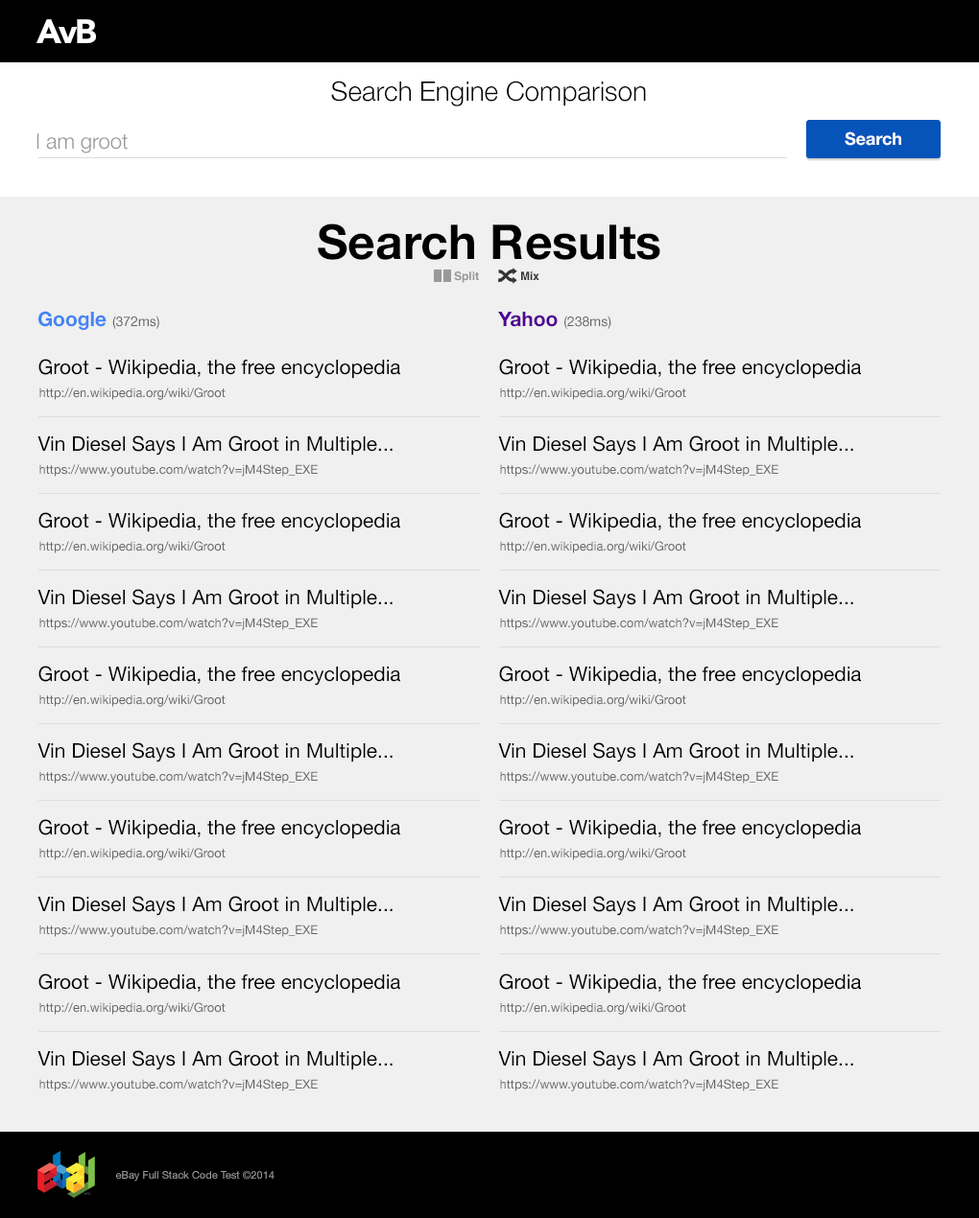
<style>
.page{position:relative;width:979px;height:1218px;background:#f0f0f0}
.page>*{position:absolute;margin:0}
.t1{font:33.6px "AvenirLTStd-Black";letter-spacing:-0.05em;color:#ffffff}
.t2{font:26.9px "HelveticaNeue-Light";color:#000000}
.t3{font:21.1px "HelveticaNeue-Light";color:#999999}
.t4{font:17.3px "HelveticaNeue-Bold";color:#ffffff}
.t5{font:48px "HelveticaNeue-Bold";color:#000000}
.t6{font:11.5px "Helvetica-Bold";color:#999999}
.t7{font:11.5px "Helvetica-Bold";color:#333333}
.t8{font:13.4px "HelveticaNeue";color:#666666}
.t9{font:20.1px "HelveticaNeue-Bold";color:#4285f4}
.t10{font:20.1px "HelveticaNeue-Bold";color:#500095}
.t11{font:20.1px "HelveticaNeue";color:#000000}
.t12{font:12.5px "HelveticaNeue";color:#666666}
.t13{font:10.6px "HelveticaNeue";color:#999999}
</style>
<div class="page">
<p class="t1" style="left:36px;top:19px;width:60px;height:24px">AvB</p>
<p class="t2" style="left:331px;top:81px;width:315px;height:25px">Search Engine Comparison</p>
<p class="t3" style="left:36px;top:133px;width:92px;height:21px">I am groot</p>
<p class="t4" style="left:844px;top:131px;width:57px;height:15px">Search</p>
<p class="t5" style="left:318px;top:224px;width:342px;height:36px">Search Results</p>
<p class="t6" style="left:454px;top:272px;width:25px;height:11px">Split</p>
<p class="t7" style="left:521px;top:272px;width:18px;height:8px">Mix</p>
<p class="t8" style="left:38px;top:311px;width:121px;height:19px"><span class="t9">Google </span>(372ms)</p>
<p class="t8" style="left:498px;top:312px;width:113px;height:17px"><span class="t10">Yahoo </span>(238ms)</p>
<p class="t11" style="left:38px;top:359px;width:362px;height:20px">Groot - Wikipedia, the free encyclopedia</p>
<p class="t11" style="left:499px;top:359px;width:362px;height:20px">Groot - Wikipedia, the free encyclopedia</p>
<p class="t12" style="left:39px;top:388px;width:186px;height:12px">http://en.wikipedia.org/wiki/Groot</p>
<p class="t12" style="left:500px;top:388px;width:186px;height:12px">http://en.wikipedia.org/wiki/Groot</p>
<p class="t11" style="left:37px;top:436px;width:355px;height:20px">Vin Diesel Says I Am Groot in Multiple...</p>
<p class="t11" style="left:498px;top:436px;width:355px;height:20px">Vin Diesel Says I Am Groot in Multiple...</p>
<p class="t12" style="left:39px;top:464px;width:279px;height:13px">https://www.youtube.com/watch?v=jM4Step_EXE</p>
<p class="t12" style="left:500px;top:464px;width:278px;height:13px">https://www.youtube.com/watch?v=jM4Step_EXE</p>
<p class="t11" style="left:38px;top:512px;width:362px;height:20px">Groot - Wikipedia, the free encyclopedia</p>
<p class="t11" style="left:499px;top:512px;width:362px;height:20px">Groot - Wikipedia, the free encyclopedia</p>
<p class="t12" style="left:39px;top:541px;width:186px;height:13px">http://en.wikipedia.org/wiki/Groot</p>
<p class="t12" style="left:500px;top:541px;width:186px;height:13px">http://en.wikipedia.org/wiki/Groot</p>
<p class="t11" style="left:37px;top:589px;width:355px;height:20px">Vin Diesel Says I Am Groot in Multiple...</p>
<p class="t11" style="left:498px;top:589px;width:355px;height:20px">Vin Diesel Says I Am Groot in Multiple...</p>
<p class="t12" style="left:39px;top:618px;width:279px;height:12px">https://www.youtube.com/watch?v=jM4Step_EXE</p>
<p class="t12" style="left:500px;top:618px;width:278px;height:12px">https://www.youtube.com/watch?v=jM4Step_EXE</p>
<p class="t11" style="left:38px;top:666px;width:362px;height:20px">Groot - Wikipedia, the free encyclopedia</p>
<p class="t11" style="left:499px;top:666px;width:362px;height:20px">Groot - Wikipedia, the free encyclopedia</p>
<p class="t12" style="left:39px;top:695px;width:186px;height:12px">http://en.wikipedia.org/wiki/Groot</p>
<p class="t12" style="left:500px;top:695px;width:186px;height:12px">http://en.wikipedia.org/wiki/Groot</p>
<p class="t11" style="left:37px;top:743px;width:355px;height:20px">Vin Diesel Says I Am Groot in Multiple...</p>
<p class="t11" style="left:498px;top:743px;width:355px;height:20px">Vin Diesel Says I Am Groot in Multiple...</p>
<p class="t12" style="left:39px;top:771px;width:279px;height:13px">https://www.youtube.com/watch?v=jM4Step_EXE</p>
<p class="t12" style="left:500px;top:771px;width:278px;height:13px">https://www.youtube.com/watch?v=jM4Step_EXE</p>
<p class="t11" style="left:38px;top:819px;width:362px;height:21px">Groot - Wikipedia, the free encyclopedia</p>
<p class="t11" style="left:499px;top:819px;width:362px;height:21px">Groot - Wikipedia, the free encyclopedia</p>
<p class="t12" style="left:39px;top:848px;width:186px;height:13px">http://en.wikipedia.org/wiki/Groot</p>
<p class="t12" style="left:500px;top:848px;width:186px;height:13px">http://en.wikipedia.org/wiki/Groot</p>
<p class="t11" style="left:37px;top:896px;width:355px;height:20px">Vin Diesel Says I Am Groot in Multiple...</p>
<p class="t11" style="left:498px;top:896px;width:355px;height:20px">Vin Diesel Says I Am Groot in Multiple...</p>
<p class="t12" style="left:39px;top:925px;width:279px;height:12px">https://www.youtube.com/watch?v=jM4Step_EXE</p>
<p class="t12" style="left:500px;top:925px;width:278px;height:12px">https://www.youtube.com/watch?v=jM4Step_EXE</p>
<p class="t11" style="left:38px;top:974px;width:362px;height:20px">Groot - Wikipedia, the free encyclopedia</p>
<p class="t11" style="left:499px;top:974px;width:362px;height:20px">Groot - Wikipedia, the free encyclopedia</p>
<p class="t12" style="left:39px;top:1003px;width:186px;height:12px">http://en.wikipedia.org/wiki/Groot</p>
<p class="t12" style="left:500px;top:1003px;width:186px;height:12px">http://en.wikipedia.org/wiki/Groot</p>
<p class="t11" style="left:37px;top:1051px;width:355px;height:20px">Vin Diesel Says I Am Groot in Multiple...</p>
<p class="t11" style="left:498px;top:1051px;width:355px;height:20px">Vin Diesel Says I Am Groot in Multiple...</p>
<p class="t12" style="left:39px;top:1079px;width:279px;height:13px">https://www.youtube.com/watch?v=jM4Step_EXE</p>
<p class="t12" style="left:500px;top:1079px;width:278px;height:13px">https://www.youtube.com/watch?v=jM4Step_EXE</p>
<p class="t13" style="left:116px;top:1171px;width:158px;height:11px">eBay Full Stack Code Test ©2014</p>
</div>
